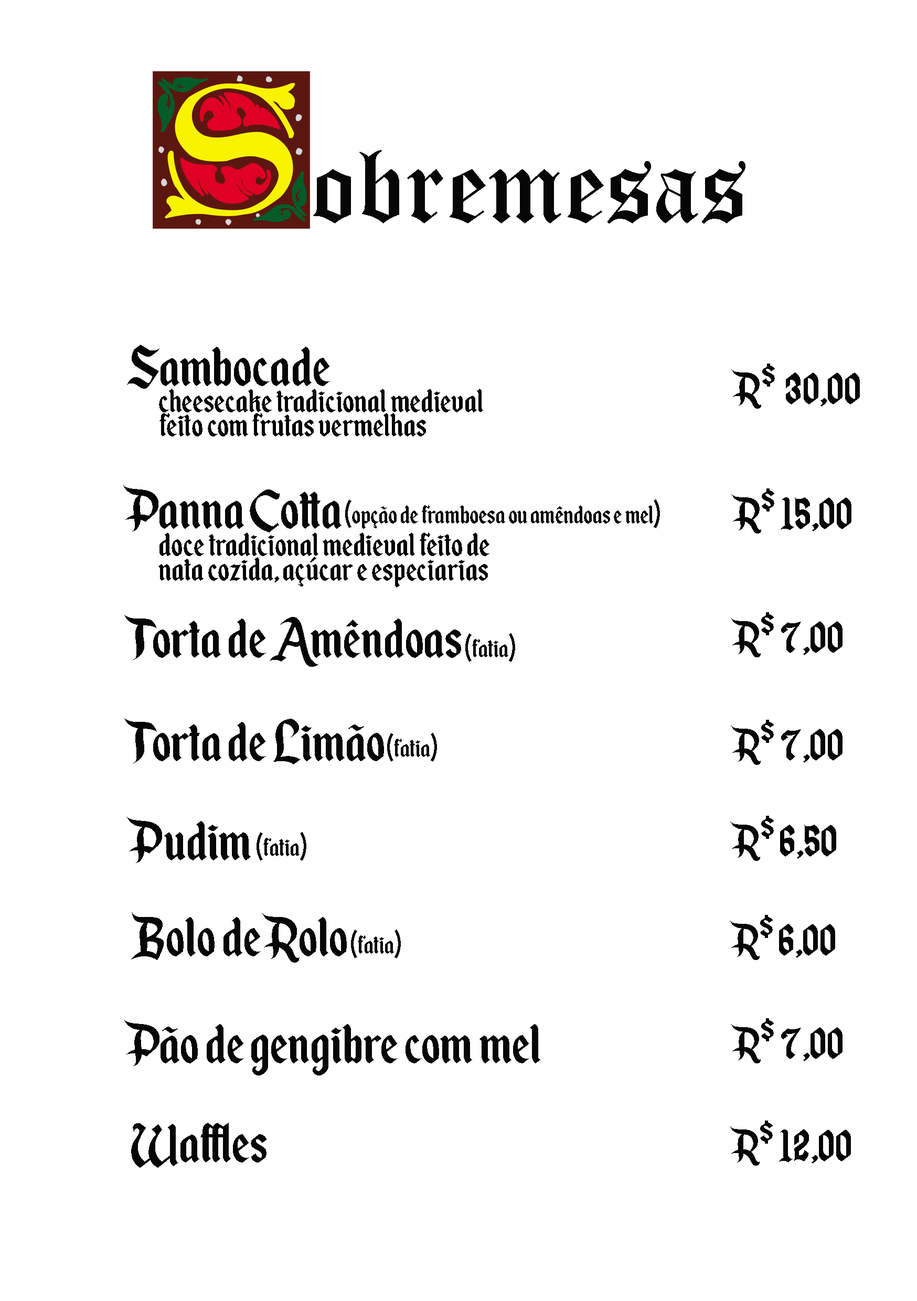
<style>
.page{position:relative;width:917px;height:1301px;background:#ffffff}
.page>*{position:absolute;margin:0}
.t1{font:104.9px "OldEnglishTextMT";color:#070606}
.t2{font:65.6px "EnchantedLand";color:#070606}
.t3{font:52.4px "EnchantedLand";color:#070606}
.t4{font:39.3px "EnchantedLand";color:#070606}
.t5{font:30.6px "EnchantedLand";color:#070606}
</style>
<div class="page">
<p class="t1" style="left:313px;top:150px;width:432px;height:73px">obremesas</p>
<p class="t2" style="left:127px;top:345px;width:203px;height:44px">Sambocade</p>
<p class="t3" style="left:731px;top:363px;width:129px;height:46px">R$  30,00</p>
<p class="t4" style="left:159px;top:389px;width:324px;height:23px">cheesecake tradicional medieval</p>
<p class="t4" style="left:159px;top:413px;width:267px;height:23px">feito com frutas vermelhas</p>
<p class="t2" style="left:123px;top:485px;width:218px;height:47px">Panna Cotta</p>
<p class="t3" style="left:731px;top:488px;width:120px;height:45px">R$ 15,00</p>
<p class="t5" style="left:345px;top:499px;width:315px;height:30px">(opção de framboesa ou amêndoas e mel)</p>
<p class="t4" style="left:159px;top:532px;width:330px;height:24px">doce tradicional medieval feito de</p>
<p class="t4" style="left:158px;top:556px;width:330px;height:31px">nata cozida, açúcar e especiarias</p>
<p class="t2" style="left:124px;top:615px;width:337px;height:52px">Torta de Amêndoas</p>
<p class="t3" style="left:731px;top:612px;width:111px;height:45px">R$ 7,00</p>
<p class="t5" style="left:465px;top:633px;width:50px;height:29px">(fatia)</p>
<p class="t2" style="left:124px;top:718px;width:260px;height:46px">Torta de Limão</p>
<p class="t3" style="left:731px;top:720px;width:111px;height:45px">R$ 7,00</p>
<p class="t5" style="left:387px;top:733px;width:50px;height:29px">(fatia)</p>
<p class="t2" style="left:127px;top:817px;width:124px;height:46px">Pudim</p>
<p class="t3" style="left:730px;top:816px;width:106px;height:45px">R$ 6,50</p>
<p class="t5" style="left:256px;top:832px;width:50px;height:29px">(fatia)</p>
<p class="t2" style="left:131px;top:912px;width:216px;height:50px">Bolo de Rolo</p>
<p class="t3" style="left:730px;top:915px;width:105px;height:45px">R$ 6,00</p>
<p class="t5" style="left:351px;top:929px;width:50px;height:29px">(fatia)</p>
<p class="t2" style="left:124px;top:1020px;width:416px;height:55px">Pão de gengibre com mel</p>
<p class="t3" style="left:731px;top:1018px;width:111px;height:45px">R$ 7,00</p>
<p class="t3" style="left:730px;top:1120px;width:121px;height:45px">R$ 12,00</p>
<p class="t2" style="left:131px;top:1122px;width:135px;height:45px">Waffles</p>
</div>
